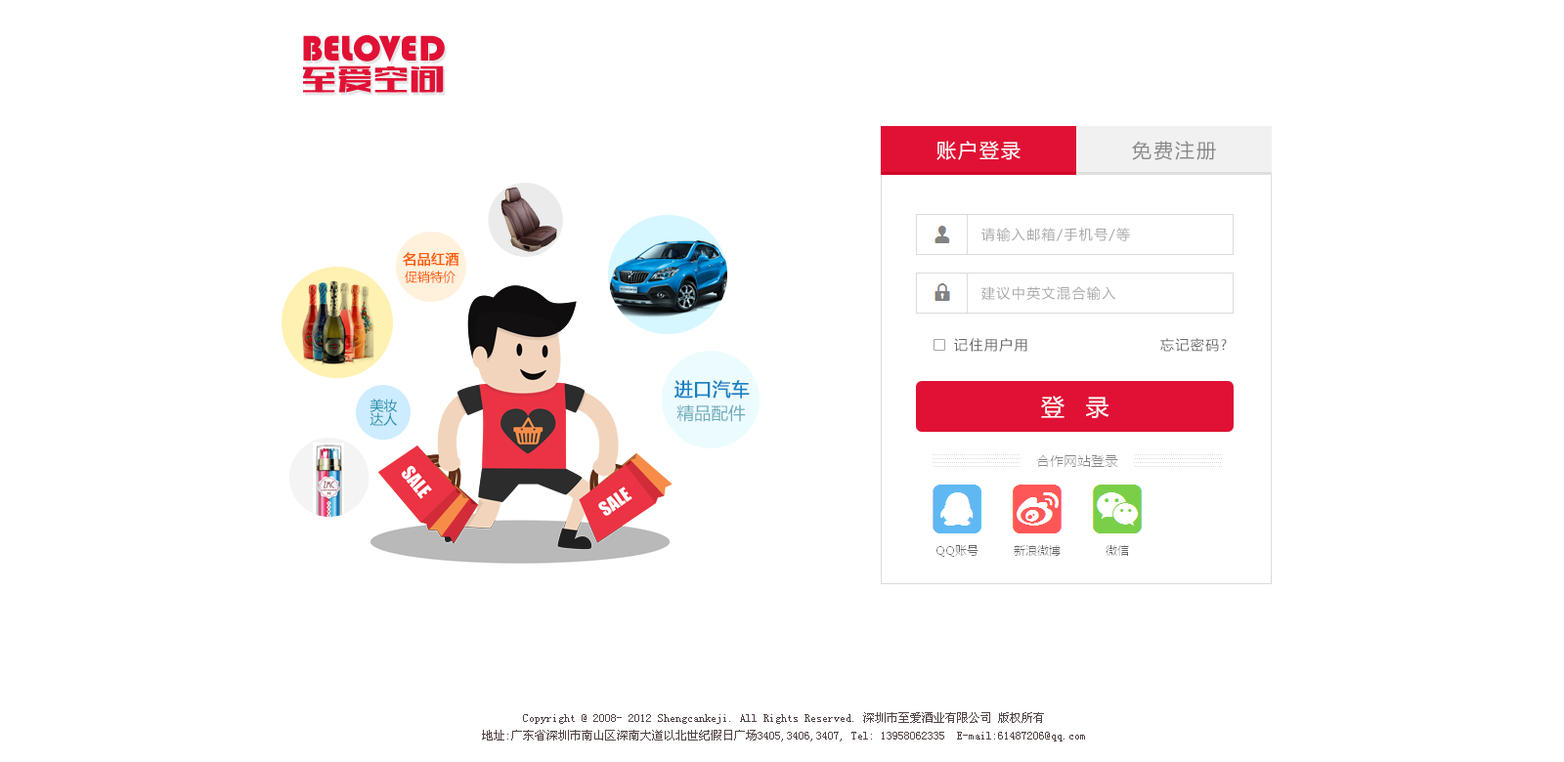
<style>
.page{position:relative;width:1564px;height:762px;background:#ffffff}
.page>*{position:absolute;margin:0}
.t1{font:37.1px "Bauhaus93";color:#e01135}
.t2{font:35.2px "FZCTHJW--GB1-0";letter-spacing:0.025em;color:#e01135}
.t3{font:19.5px "MicrosoftYaHei";letter-spacing:0.1em;color:#ffffff}
.t4{font:19.5px "MicrosoftYaHei";letter-spacing:0.1em;color:#898989}
.t5{font:13.7px "MicrosoftYaHei";letter-spacing:0.1em;color:#a9a9a9}
.t6{font:13.7px "MicrosoftYaHei";color:#ff5a00;font-weight:bold}
.t7{font:12.7px "MicrosoftYaHei";color:#ff5a00}
.t8{font:13.7px "MicrosoftYaHei";letter-spacing:0.1em;color:#696969}
.t9{font:18.5px "MicrosoftYaHei";color:#1781c4;font-weight:bold}
.t10{font:13.7px/13.7px "MicrosoftYaHei";color:#1b8eaa}
.t11{font:23.5px "MicrosoftYaHei";letter-spacing:0.1em;color:#ffffff}
.t12{font:17.2px "MicrosoftYaHei";color:#6eabba}
.t13{font:11.7px/17.6px "SimSun";color:#514442}
</style>
<div class="page">
<p class="t1" style="left:303px;top:35px;width:142px;height:28px">BELOVED</p>
<p class="t2" style="left:303px;top:65px;width:141px;height:28px">至爱空间</p>
<p class="t3" style="left:936px;top:141px;width:84px;height:19px">账户登录</p>
<p class="t4" style="left:1132px;top:141px;width:84px;height:19px">免费注册</p>
<p class="t5" style="left:981px;top:228px;width:149px;height:13px">请输入邮箱/手机号/等</p>
<p class="t6" style="left:403px;top:252px;width:56px;height:15px">名品红酒</p>
<p class="t7" style="left:405px;top:271px;width:51px;height:12px">促销特价</p>
<p class="t5" style="left:981px;top:286px;width:134px;height:14px">建议中英文混合输入</p>
<p class="t8" style="left:954px;top:338px;width:73px;height:14px">记住用户用</p>
<p class="t8" style="left:1160px;top:338px;width:67px;height:14px">忘记密码?</p>
<p class="t9" style="left:674px;top:380px;width:76px;height:19px">进口汽车</p>
<p class="t10" style="left:369px;top:399px;width:28px;height:27px">美妆<br>达人</p>
<p class="t11" style="left:1041px;top:396px;width:68px;height:22px">登  录</p>
<p class="t12" style="left:676px;top:405px;width:70px;height:17px">精品配件</p>
<p class="t13" style="left:482px;top:713px;width:603px;height:29px;text-align:center">Copyright @ 2008- 2012 Shengcankeji. All Rights Reserved. 深圳市至爱酒业有限公司 版权所有<br>地址:广东省深圳市南山区深南大道以北世纪假日广场3405,3406,3407, Tel: 13958062335  E-mail:61487206@qq.com</p>
</div>
